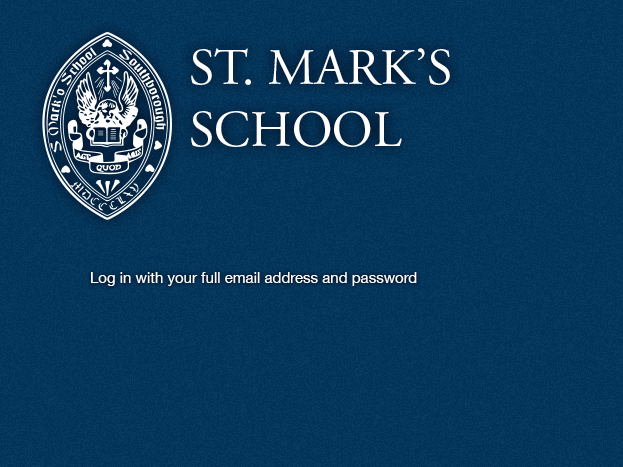
<style>
.page{position:relative;width:623px;height:467px;background:#08395e}
.page>*{position:absolute;margin:0}
.t1{font:51.2px "AGaramondPro-Regular";color:#ffffff}
.t2{font:15px "HelveticaNeue";color:#ffffff}
</style>
<div class="page">
<p class="t1" style="left:191px;top:48px;width:259px;height:99px">ST. MARK’S<br>SCHOOL</p>
<p class="t2" style="left:91px;top:272px;width:326px;height:14px">Log in with your full email address and password</p>
</div>
